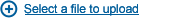
<style>
.page{position:relative;width:174px;height:18px;background:#ffffff}
.page>*{position:absolute;margin:0}
.t1{font:12px "ArialMT";color:#005d9a}
</style>
<div class="page">
<p class="t1" style="left:24px;top:4px;width:114px;height:12px">Select a file to upload</p>
<p class="t1" style="left:24px;top:4px;width:114px;height:12px">Select a file to upload</p>
</div>
